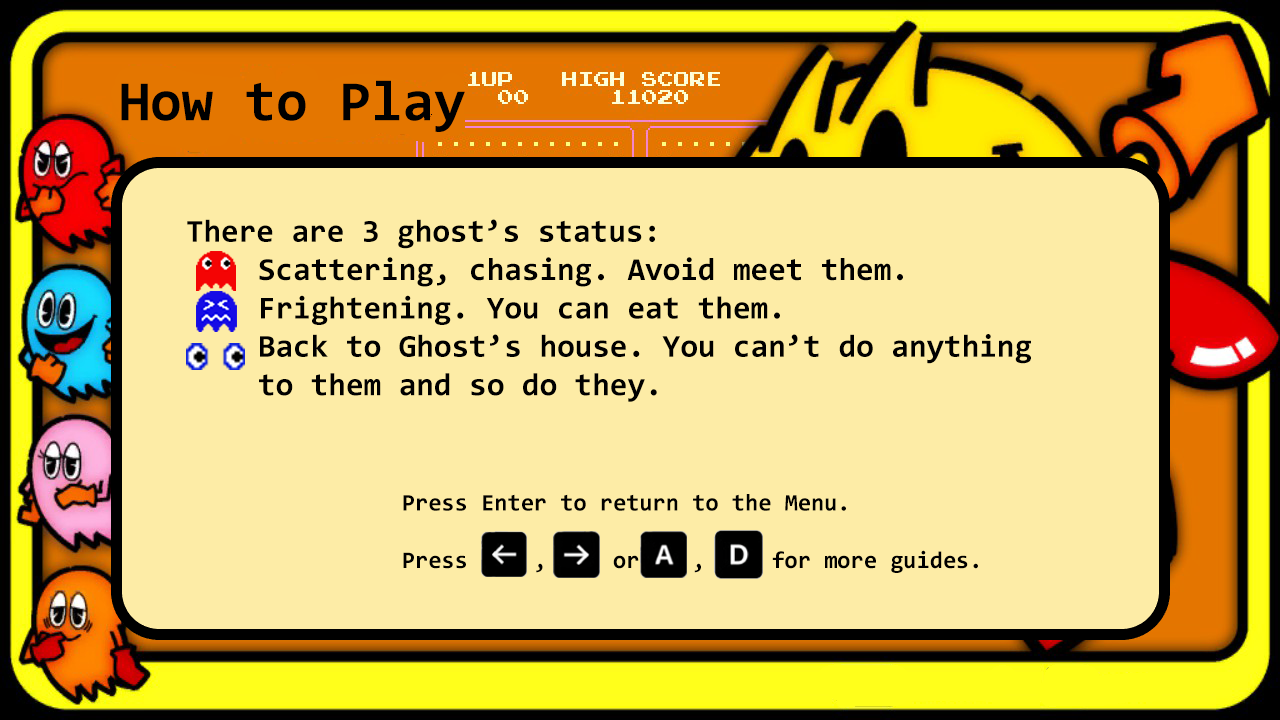
<style>
.page{position:relative;width:1280px;height:720px;background:#fdeca6}
.page>*{position:absolute;margin:0}
.t1{font:57.4px "Consolas-Bold";color:#000000}
.t2{font:32px "Consolas-Bold";color:#000000}
.t3{font:24px "Consolas-Bold";color:#000000}
</style>
<div class="page">
<p class="t1" style="left:121px;top:80px;width:344px;height:52px">How to Play</p>
<p class="t2" style="left:187px;top:219px;width:844px;height:354px">There are 3 ghost’s status:<br>  Scattering, chasing. Avoid meet them.<br>  Frightening. You can eat them.<br>  Back to Ghost’s house. You can’t do anything<br>  to them and so do they.<br><br><br>      <span class="t3">Press Enter to return to the Menu.<br>      <br>      Press     ,     or    ,     for more guides.</span></p>
</div>
